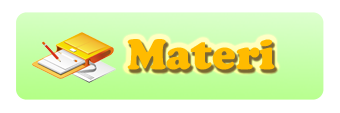
<style>
.page{position:relative;width:340px;height:113px;background:#ffffff}
.page>*{position:absolute;margin:0}
.t1{font:44.3px "CooperBlack";color:#ffbb00}
</style>
<div class="page">
<p class="t1" style="left:127px;top:39px;width:148px;height:31px">Materi</p>
</div>
